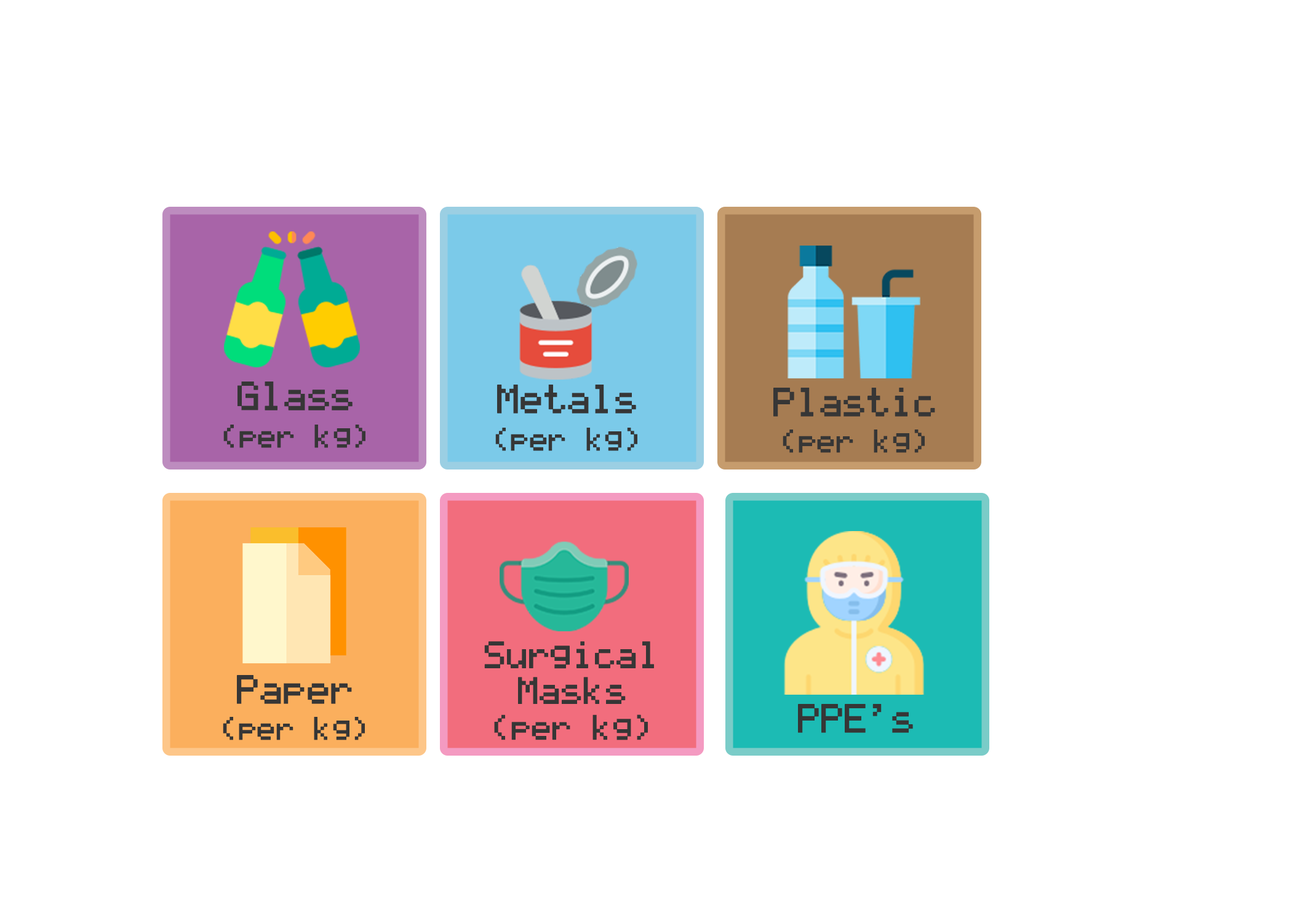
<style>
.page{position:relative;width:1292px;height:923px;background:#ffffff}
.page>*{position:absolute;margin:0}
.t1{font:30.8px "LCDSolid";color:#363636}
.t2{font:38.5px "LCDSolid";color:#363636}
.t3{font:30.8px/35.9px "LCDSolid";color:#363636}
.t4{font:38.5px/35.9px "LCDSolid";color:#363636}
.t5{font:35.9px/35.9px "LCDSolid";color:#363636}
.t6{font:33.3px/35.9px "LCDSolid";color:#363636}
</style>
<div class="page">
<p class="t1" style="left:495px;top:385px;width:142px;height:66px;text-align:center"><span class="t2">Metals<br></span>(per kg)</p>
<p class="t3" style="left:773px;top:388px;width:162px;height:65px;text-align:center"><span class="t4">Plastic<br></span>(per kg)</p>
<p class="t5" style="left:484px;top:641px;width:170px;height:99px;text-align:center">Surgical<br>Masks<br><span class="t6">(per kg)</span></p>
<p class="t3" style="left:223px;top:675px;width:142px;height:65px;text-align:center"><span class="t4">Paper<br></span>(per kg)</p>
<p class="t2" style="left:798px;top:704px;width:115px;height:29px">PPE's</p>
</div>
